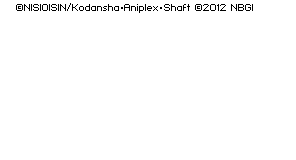
<style>
.page{position:relative;width:296px;height:160px;background:#ffffff}
.page>*{position:absolute;margin:0}
.t1{font:8px "PixelFJ8pt1Normal";color:#000000}
.t2{font:8px "KozGoPr6N-Regular";color:#000000}
</style>
<div class="page">
<p class="t1" style="left:16px;top:3px;width:237px;height:10px">©NISIOISIN/Kodansha<span class="t2">・</span>Aniplex<span class="t2">・</span>Shaft ©2012 NBGI</p>
</div>
